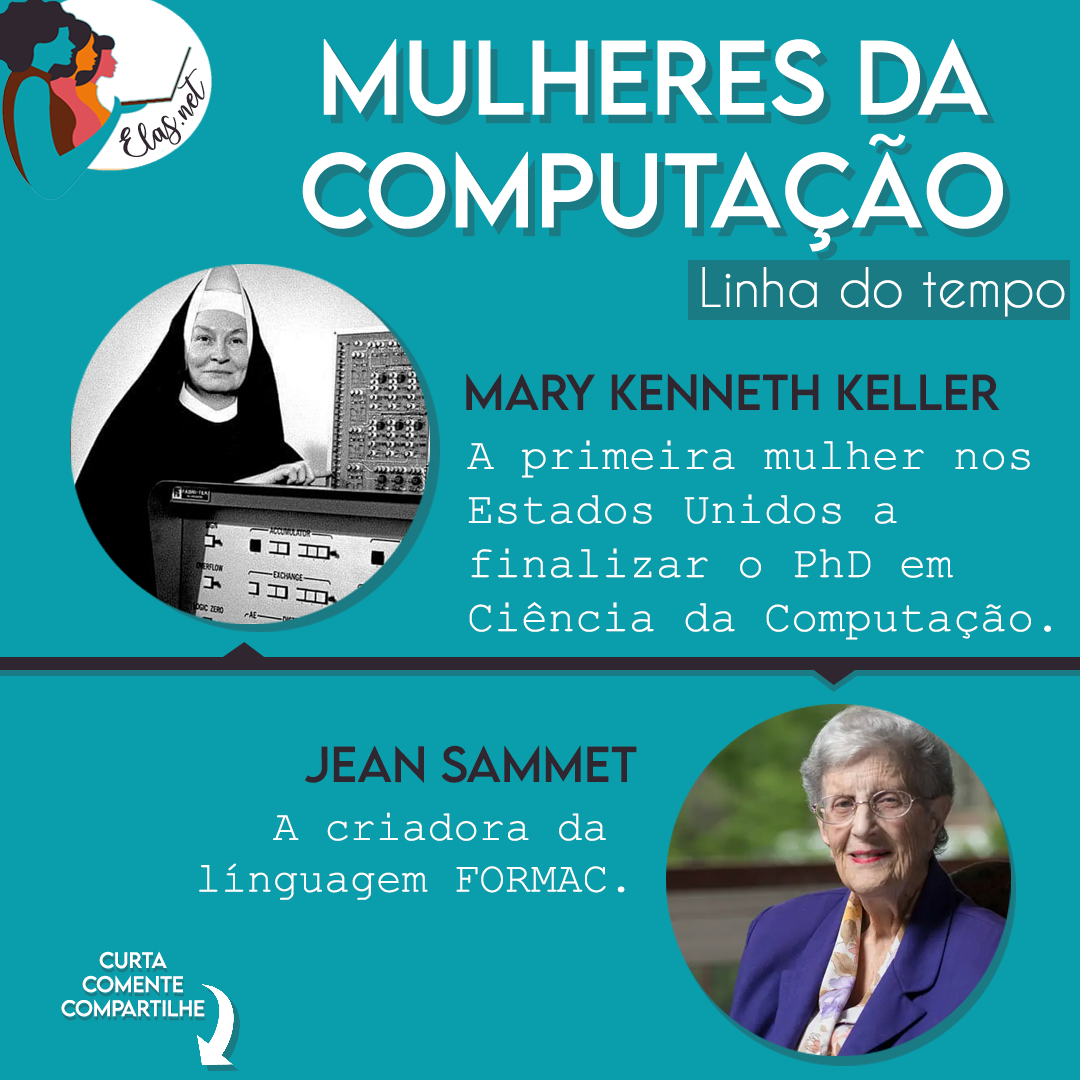
<style>
.page{position:relative;width:1080px;height:1080px;background:#0a9eac}
.page>*{position:absolute;margin:0}
.t1{font:25px "charlinda-Regular";color:#2f262f;scale:1.18 1}
.t2{font:51px "CaviarDreams";color:#ffffff}
.t3{font:45px "LEMONMILK-Regular";color:#2f262f}
.t4{font:45px "CourierNewPSMT";color:#ffffff}
.t5{font:43px "CourierNewPSMT";color:#ffffff}
.t6{font:20px "LEMONMILK-Regular";color:#ffffff}
</style>
<div class="page">
<p class="t1" style="left:119px;top:68px;width:86px;height:89px;rotate:-43deg">Elas.net</p>
<p class="t2" style="left:702px;top:267px;width:363px;height:50px">Linha do tempo</p>
<p class="t3" style="left:466px;top:373px;width:534px;height:38px">Mary Kenneth Keller</p>
<p class="t4" style="left:467px;top:440px;width:584px;height:200px">A primeira mulher nos <br>Estados Unidos a <br>finalizar o PhD em <br>Ciência da Computação.</p>
<p class="t3" style="left:305px;top:745px;width:332px;height:38px">Jean Sammet</p>
<p class="t5" style="left:199px;top:812px;width:426px;height:88px;text-align:right">A criadora da <br>línguagem FORMAC.</p>
<p class="t6" style="left:61px;top:951px;width:144px;height:66px;text-align:center">Curta<br>Comente<br>Compartilhe</p>
</div>
